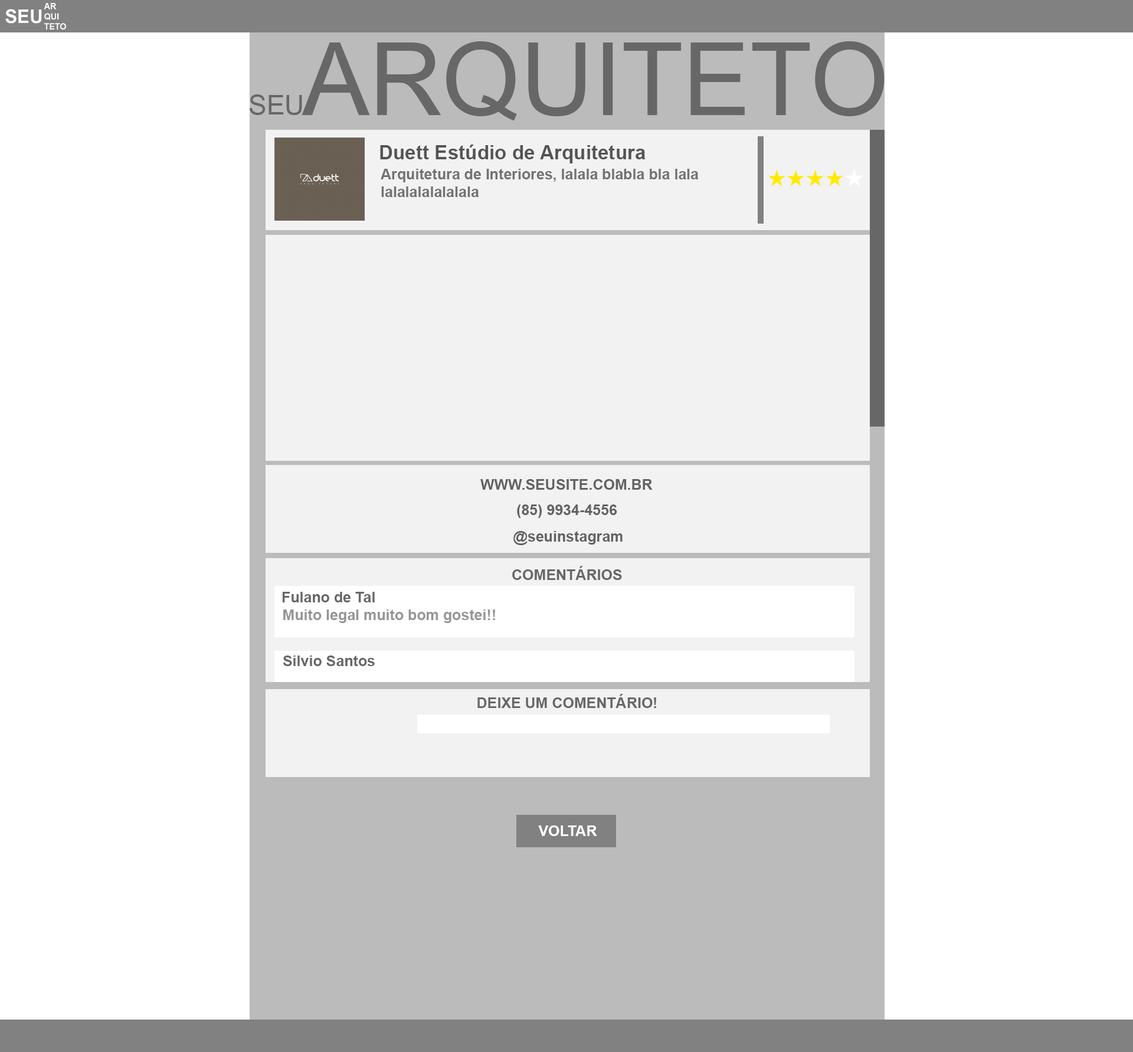
<style>
.page{position:relative;width:1133px;height:1052px;background:#ffffff}
.page>*{position:absolute;margin:0}
.t1{font:19.7px "Arial-BoldMT";color:#545454}
.t2{font:14.8px "Arial-BoldMT";color:#727272}
.t3{font:14.8px "Arial-BoldMT";color:#636363}
.t4{font:14.8px "Arial-BoldMT";color:#676767}
.t5{font:14.8px "Arial-BoldMT";color:#959595}
.t6{font:14.8px "Arial-BoldMT";color:#ffffff}
</style>
<div class="page">
<p class="t1" style="left:380px;top:145px;width:266px;height:18px">Duett Estúdio de Arquitetura</p>
<p class="t2" style="left:381px;top:169px;width:318px;height:28px">Arquitetura de Interiores, lalala blabla bla lala<br>lalalalalalalala</p>
<p class="t3" style="left:480px;top:479px;width:173px;height:11px">WWW.SEUSITE.COM.BR</p>
<p class="t3" style="left:517px;top:505px;width:100px;height:13px">(85) 9934-4556</p>
<p class="t3" style="left:513px;top:531px;width:110px;height:14px">@seuinstagram</p>
<p class="t4" style="left:512px;top:566px;width:110px;height:14px">COMENTÁRIOS</p>
<p class="t4" style="left:282px;top:592px;width:93px;height:11px">Fulano de Tal</p>
<p class="t5" style="left:283px;top:610px;width:212px;height:13px">Muito legal muito bom gostei!!</p>
<p class="t4" style="left:283px;top:656px;width:92px;height:10px">Silvio Santos</p>
<p class="t4" style="left:477px;top:694px;width:179px;height:14px">DEIXE UM COMENTÁRIO!</p>
<p class="t6" style="left:538px;top:826px;width:59px;height:10px">VOLTAR</p>
</div>
